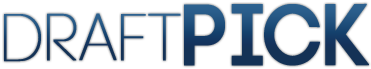
<style>
.page{position:relative;width:371px;height:69px;background:#ffffff}
.page>*{position:absolute;margin:0}
.t1{font:85.5px "Code-Bold";letter-spacing:0.02em;font-weight:bold;scale:0.93 1}
.t2{font:65.6px "Code-Light";letter-spacing:0.02em;font-weight:bold;scale:0.94 1}
</style>
<div class="page">
<p class="t1" style="left:184px;top:3px;width:185px;height:63px">pick</p>
<p class="t2" style="left:4px;top:13px;width:177px;height:49px">Draft</p>
</div>
